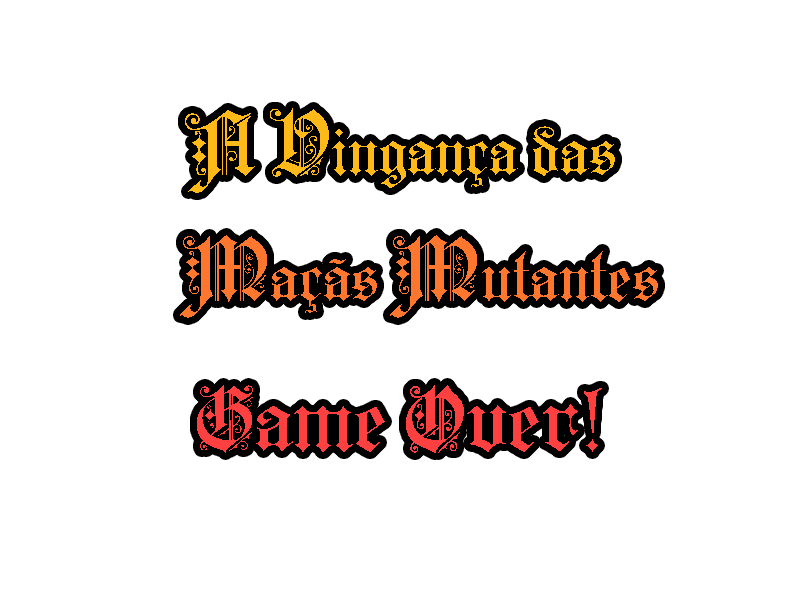
<style>
.page{position:relative;width:800px;height:600px;background:#ffffff}
.page>*{position:absolute;margin:0}
.t1{font:72px "KaiserzeitGotisch";color:#ffba1a}
.t2{font:96px "KaiserzeitGotisch";color:#ffba1a}
.t3{font:72px "KaiserzeitGotisch";color:#ff772e}
.t4{font:96px "KaiserzeitGotisch";color:#ff772e}
.t5{font:96px "KaiserzeitGotisch";color:#ff4040}
</style>
<div class="page">
<p class="t1" style="left:185px;top:108px;width:430px;height:85px"><span class="t2">A V</span>ingança das</p>
<p class="t3" style="left:180px;top:235px;width:478px;height:83px"><span class="t4">M</span>açãs <span class="t4">M</span>utantes</p>
<p class="t5" style="left:197px;top:385px;width:405px;height:68px">Game Over!</p>
</div>
